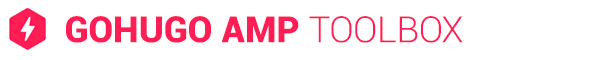
<style>
.page{position:relative;width:600px;height:60px;background:#ffffff}
.page>*{position:absolute;margin:0}
.t1{font:36.3px "Roboto-Black";color:#ff1d55;text-transform:uppercase}
.t2{font:36.3px "Roboto-Light";color:#ff1d55;text-transform:uppercase}
</style>
<div class="page">
<p class="t1" style="left:66px;top:16px;width:397px;height:27px">GOHUGO AMP <span class="t2">TOOLBOX</span></p>
<p class="t1" style="left:66px;top:16px;width:397px;height:27px">GOHUGO AMP <span class="t2">TOOLBOX</span></p>
</div>
